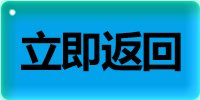
<style>
.page{position:relative;width:200px;height:100px;background:#03a3ec}
.page>*{position:absolute;margin:0}
.t1{font:42.3px "MicrosoftYaHei-Bold";letter-spacing:-0.05em;color:#000000}
</style>
<div class="page">
<p class="t1" style="left:21px;top:30px;width:160px;height:42px">立即返回</p>
</div>
